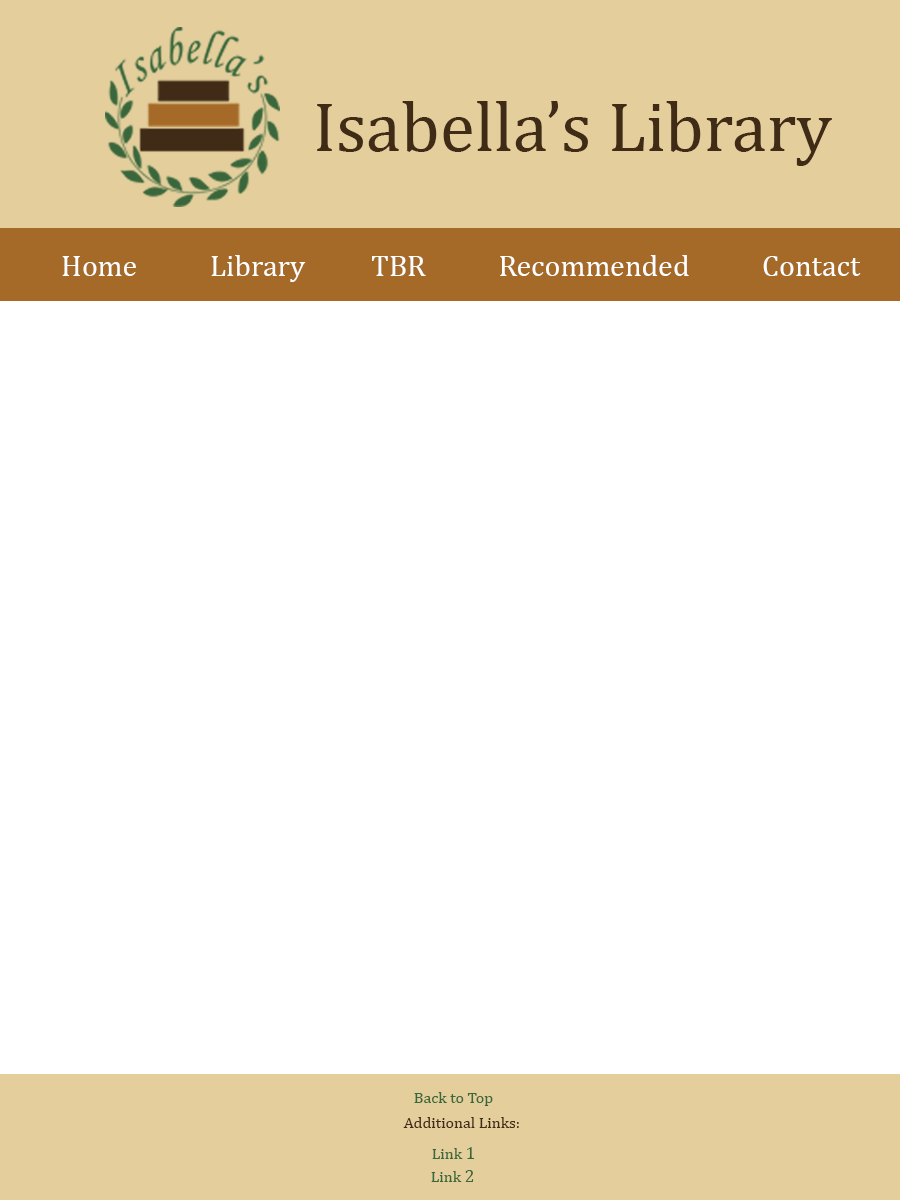
<style>
.page{position:relative;width:900px;height:1200px;background:#ffffff}
.page>*{position:absolute;margin:0}
.t1{font:71px "Cambria";color:#402b16}
.t2{font:30px "Cambria";color:#ffffff}
.t3{font:16px "Cambria";color:#3a673b}
.t4{font:16px "Cambria";color:#402b16}
.t5{font:18px "Cambria";color:#3a673b}
</style>
<div class="page">
<p class="t1" style="left:317px;top:101px;width:515px;height:65px">Isabella’s Library</p>
<p class="t2" style="left:62px;top:255px;width:799px;height:27px">Home           Library          TBR           Recommended           Contact</p>
<p class="t3" style="left:414px;top:1092px;width:79px;height:14px">Back to Top</p>
<p class="t4" style="left:403px;top:1117px;width:116px;height:11px">Additional Links:</p>
<p class="t3" style="left:432px;top:1147px;width:43px;height:12px">Link <span class="t5">1</span></p>
<p class="t3" style="left:431px;top:1170px;width:43px;height:12px">Link <span class="t5">2</span></p>
</div>
